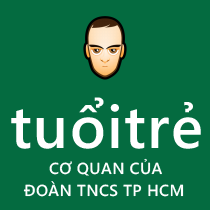
<style>
.page{position:relative;width:210px;height:210px;background:#046b40}
.page>*{position:absolute;margin:0}
.t1{font:60px "SegoeWP-Semibold";letter-spacing:0.025em;color:#ffffff}
.t2{font:16px "SegoeWP-Semibold";letter-spacing:0.025em;color:#fefefe}
.t3{font:16px "SegoeWP-Semibold";letter-spacing:0.025em;color:#ffffff}
</style>
<div class="page">
<p class="t1" style="left:11px;top:97px;width:190px;height:52px">tuổitrẻ</p>
<p class="t2" style="left:49px;top:158px;width:113px;height:18px">CƠ QUAN CỦA</p>
<p class="t3" style="left:23px;top:181px;width:161px;height:16px">ĐOÀN TNCS TP HCM</p>
</div>
